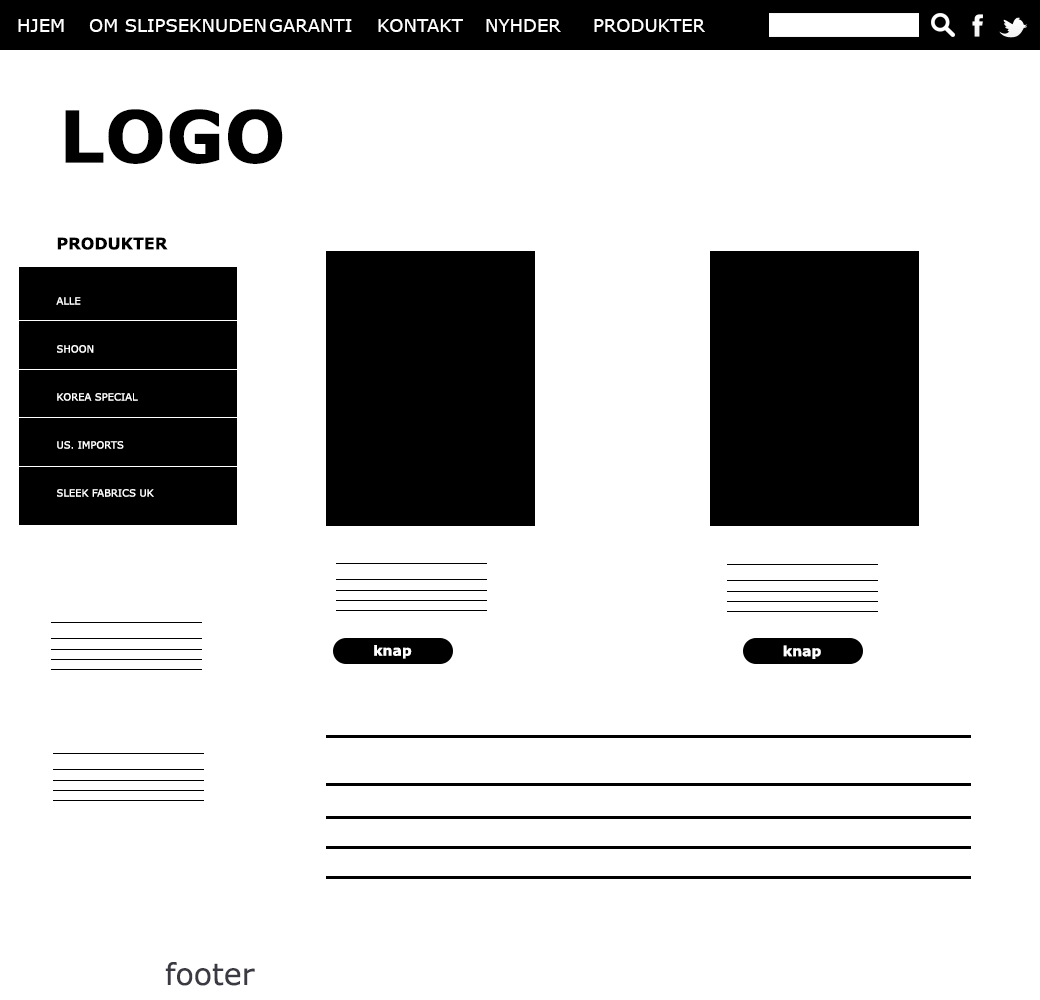
<style>
.page{position:relative;width:1040px;height:1000px;background:#ffffff}
.page>*{position:absolute;margin:0}
.t1{font:18px "Verdana";color:#ffffff}
.t2{font:72px "Verdana-Bold";color:#000000}
.t3{font:14px "Verdana-Bold";color:#ffffff}
.t4{font:30px "Verdana";color:#3a3a43}
</style>
<div class="page">
<p class="t1" style="left:18px;top:19px;width:687px;height:13px">HJEM OM SLIPSEKNUDEN GARANTI KONTAKT NYHDER PRODUKTER</p>
<p class="t2" style="left:65px;top:109px;width:218px;height:55px">LOGO</p>
<p class="t3" style="left:374px;top:645px;width:38px;height:14px">knap</p>
<p class="t3" style="left:783px;top:645px;width:38px;height:14px">knap</p>
<p class="t4" style="left:165px;top:962px;width:90px;height:24px">footer</p>
</div>
